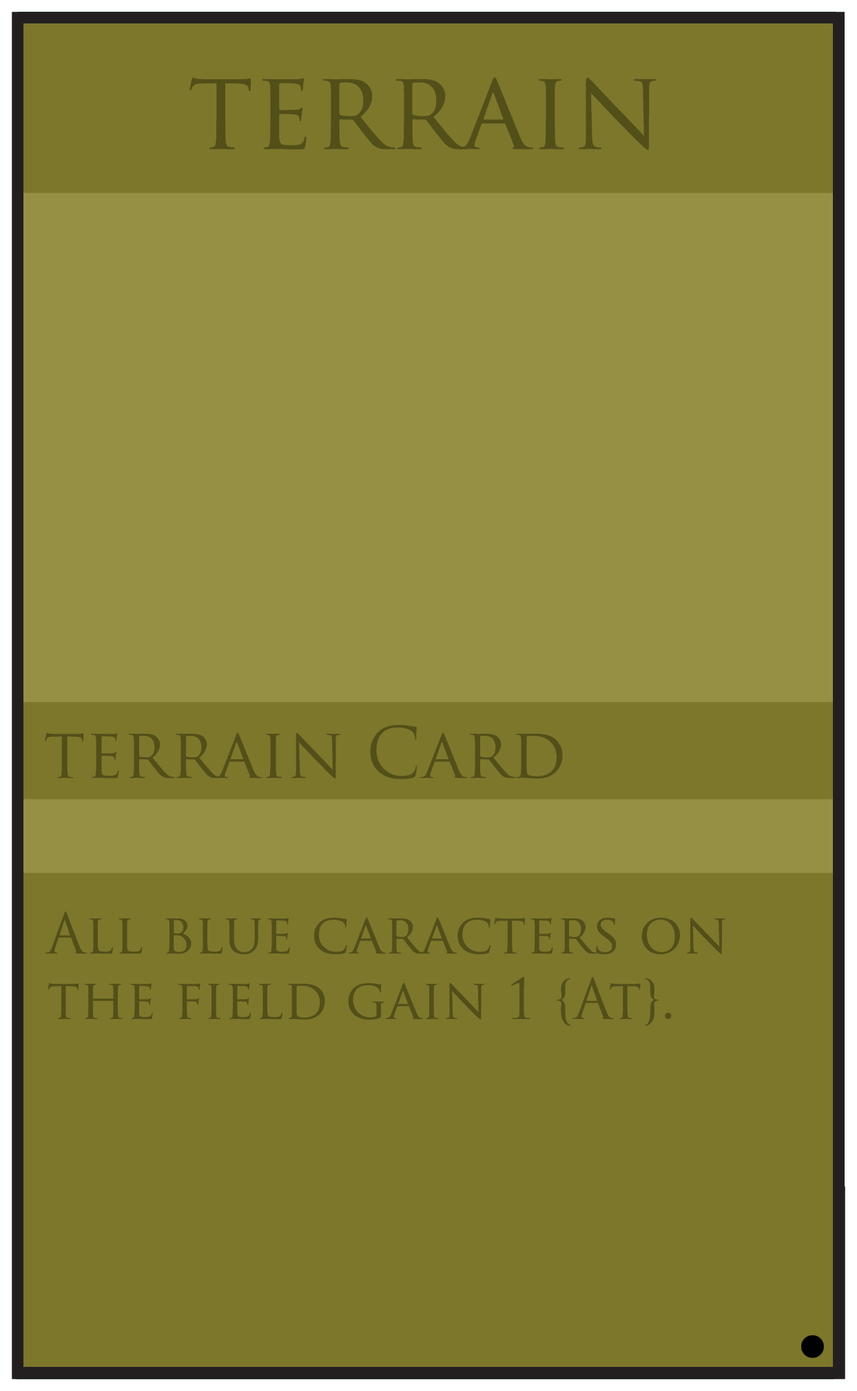
<style>
.page{position:relative;width:857px;height:1391px;background:#7c772b}
.page>*{position:absolute;margin:0}
.t1{font:109.1px "TrajanPro-Regular";color:#534f19}
.t2{font:68.9px "TrajanPro-Regular";color:#534f19}
.t3{font:54.5px "TrajanPro-Regular";color:#534f19}
</style>
<div class="page">
<p class="t1" style="left:189px;top:77px;width:467px;height:73px">terrain</p>
<p class="t2" style="left:45px;top:725px;width:518px;height:54px">terrain Card</p>
<p class="t3" style="left:45px;top:912px;width:681px;height:114px">All blue caracters on <br>the field gain 1 {At}.</p>
</div>
